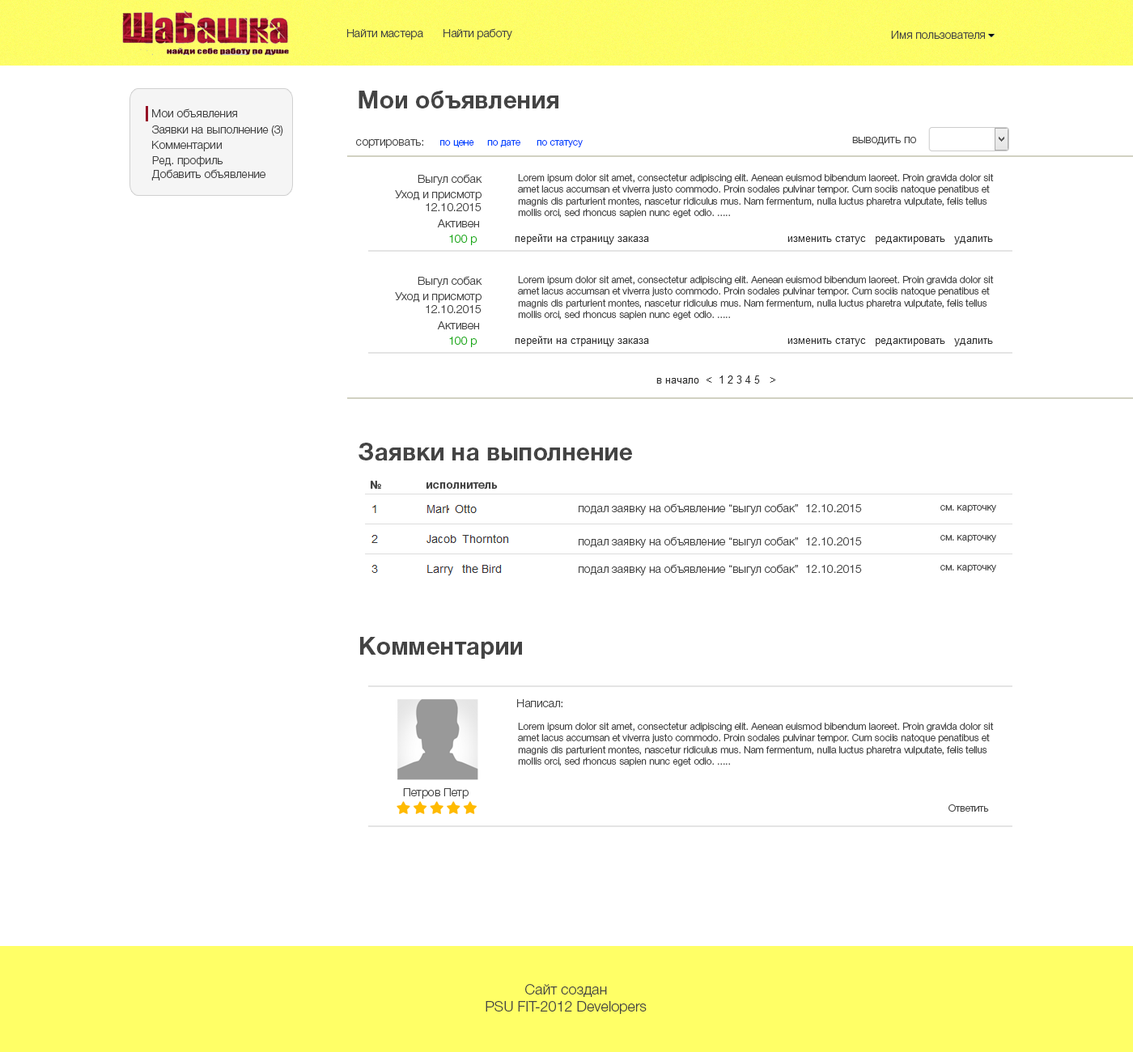
<style>
.page{position:relative;width:1133px;height:1052px;background:#ffffff}
.page>*{position:absolute;margin:0}
.t1{font:11.3px "HelveticaNeueCyr-Light";color:#444444}
.t2{font:24.3px "HelveticaNeueCyr-Bold";color:#444444}
.t3{font:9.7px "HelveticaNeueCyr-Light";color:#0042fe}
.t4{font:9.7px "HelveticaNeueCyr-Light";color:#444444}
.t5{font:11.3px "HelveticaNeueCyr-Light";color:#1aab17}
.t6{font:11.3px "HelveticaNeueCyr-Bold";color:#444444}
.t7{font:14.6px "HelveticaNeueCyr-Light";color:#444444}
</style>
<div class="page">
<p class="t1" style="left:347px;top:29px;width:76px;height:11px">Найти мастера</p>
<p class="t1" style="left:444px;top:28px;width:68px;height:12px">Найти работу</p>
<p class="t1" style="left:891px;top:31px;width:94px;height:8px">Имя пользователя</p>
<p class="t2" style="left:359px;top:91px;width:200px;height:18px">Мои объявления</p>
<p class="t1" style="left:152px;top:108px;width:85px;height:9px">Мои объявления</p>
<p class="t1" style="left:152px;top:125px;width:131px;height:11px">Заявки на выполнение (3)</p>
<p class="t1" style="left:852px;top:137px;width:64px;height:9px">выводить по</p>
<p class="t1" style="left:152px;top:141px;width:70px;height:10px">Комментарии</p>
<p class="t3" style="left:356px;top:139px;width:227px;height:9px"><span class="t1">сортировать:     </span>по цене     по дате      по статусу</p>
<p class="t1" style="left:152px;top:156px;width:71px;height:11px">Ред. профиль</p>
<p class="t1" style="left:151px;top:169px;width:114px;height:12px">Добавить объявление</p>
<p class="t1" style="left:418px;top:174px;width:64px;height:11px">Выгул собак</p>
<p class="t4" style="left:518px;top:174px;width:476px;height:44px">Lorem ipsum dolor sit amet, consectetur adipiscing elit. Aenean euismod bibendum laoreet. Proin gravida dolor sit amet lacus accumsan et viverra justo commodo. Proin sodales pulvinar tempor. Cum sociis natoque penatibus et magnis dis parturient montes, nascetur ridiculus mus. Nam fermentum, nulla luctus pharetra vulputate, felis tellus mollis orci, sed rhoncus sapien nunc eget odio. .....</p>
<p class="t1" style="left:395px;top:190px;width:87px;height:21px;text-align:right">Уход и присмотр<br>12.10.2015</p>
<p class="t1" style="left:437px;top:219px;width:42px;height:8px">Активен</p>
<p class="t5" style="left:449px;top:235px;width:29px;height:10px">100 р</p>
<p class="t1" style="left:418px;top:276px;width:64px;height:11px">Выгул собак</p>
<p class="t4" style="left:518px;top:276px;width:476px;height:44px">Lorem ipsum dolor sit amet, consectetur adipiscing elit. Aenean euismod bibendum laoreet. Proin gravida dolor sit amet lacus accumsan et viverra justo commodo. Proin sodales pulvinar tempor. Cum sociis natoque penatibus et magnis dis parturient montes, nascetur ridiculus mus. Nam fermentum, nulla luctus pharetra vulputate, felis tellus mollis orci, sed rhoncus sapien nunc eget odio. .....</p>
<p class="t1" style="left:395px;top:292px;width:87px;height:21px;text-align:right">Уход и присмотр<br>12.10.2015</p>
<p class="t1" style="left:437px;top:321px;width:42px;height:8px">Активен</p>
<p class="t5" style="left:449px;top:337px;width:29px;height:10px">100 р</p>
<p class="t2" style="left:359px;top:443px;width:273px;height:18px">Заявки на выполнение</p>
<p class="t6" style="left:371px;top:481px;width:10px;height:8px">№</p>
<p class="t6" style="left:427px;top:482px;width:71px;height:8px">исполнитель</p>
<p class="t1" style="left:579px;top:503px;width:283px;height:12px">подал заявку на объявление “выгул собак”  12.10.2015</p>
<p class="t4" style="left:941px;top:505px;width:55px;height:7px">см. карточку</p>
<p class="t1" style="left:579px;top:537px;width:283px;height:11px">подал заявку на объявление “выгул собак”  12.10.2015</p>
<p class="t4" style="left:941px;top:535px;width:55px;height:7px">см. карточку</p>
<p class="t1" style="left:579px;top:564px;width:283px;height:12px">подал заявку на объявление “выгул собак”  12.10.2015</p>
<p class="t4" style="left:941px;top:565px;width:55px;height:7px">см. карточку</p>
<p class="t2" style="left:360px;top:637px;width:162px;height:22px">Комментарии</p>
<p class="t1" style="left:517px;top:699px;width:46px;height:8px">Написал:</p>
<p class="t4" style="left:518px;top:723px;width:476px;height:44px">Lorem ipsum dolor sit amet, consectetur adipiscing elit. Aenean euismod bibendum laoreet. Proin gravida dolor sit amet lacus accumsan et viverra justo commodo. Proin sodales pulvinar tempor. Cum sociis natoque penatibus et magnis dis parturient montes, nascetur ridiculus mus. Nam fermentum, nulla luctus pharetra vulputate, felis tellus mollis orci, sed rhoncus sapien nunc eget odio. .....</p>
<p class="t1" style="left:403px;top:788px;width:66px;height:11px">Петров Петр</p>
<p class="t4" style="left:949px;top:805px;width:40px;height:7px">Ответить</p>
<p class="t7" style="left:486px;top:984px;width:161px;height:30px;text-align:center">Сайт создан<br>PSU FIT-2012 Developers</p>
</div>
